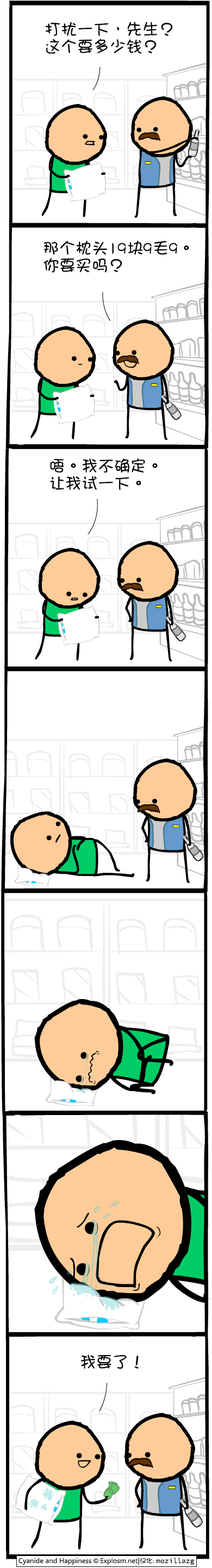
<style>
.page{position:relative;width:212px;height:1568px;background:#ffffff}
.page>*{position:absolute;margin:0}
.t1{font:16.3px/17.4px "DFGirl";color:#000000}
.t2{font:16.3px "DFGirl";color:#000000}
</style>
<div class="page">
<p class="t1" style="left:45px;top:21px;width:128px;height:33px">打扰一下，先生？<br>这个要多少钱？</p>
<p class="t1" style="left:44px;top:241px;width:145px;height:32px">那个枕头19块9毛9。<br>你要买吗？</p>
<p class="t1" style="left:50px;top:458px;width:108px;height:33px">唔。我不确定。<br>让我试一下。</p>
<p class="t2" style="left:81px;top:1355px;width:58px;height:14px">我要了！</p>
</div>
